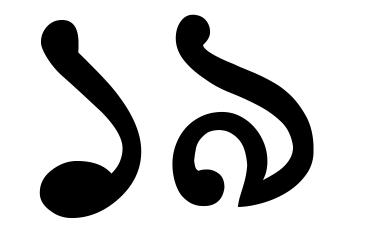
<style>
.page{position:relative;width:372px;height:248px;background:#ffffff}
.page>*{position:absolute;margin:0}
.t1{font:300px "KalpurushANSI";color:#000000}
</style>
<div class="page">
<p class="t1" style="left:39px;top:14px;width:275px;height:204px">19</p>
</div>
